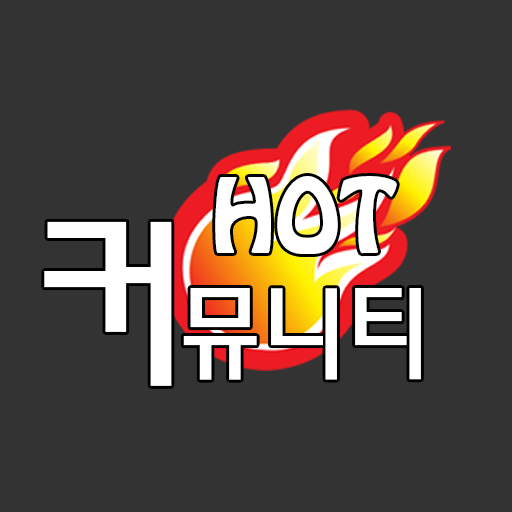
<style>
.page{position:relative;width:512px;height:512px;background:#333333}
.page>*{position:absolute;margin:0}
.t1{font:91.1px "HoboStd";color:#ffffff}
.t2{font:186.6px "MoeumTR-HM";color:#ffffff}
.t3{font:103.5px "MoeumTR-HM";color:#ffffff}
</style>
<div class="page">
<p class="t1" style="left:215px;top:176px;width:182px;height:78px">HOT</p>
<p class="t2" style="left:44px;top:221px;width:128px;height:165px">커</p>
<p class="t3" style="left:183px;top:288px;width:238px;height:92px">뮤니티</p>
</div>
